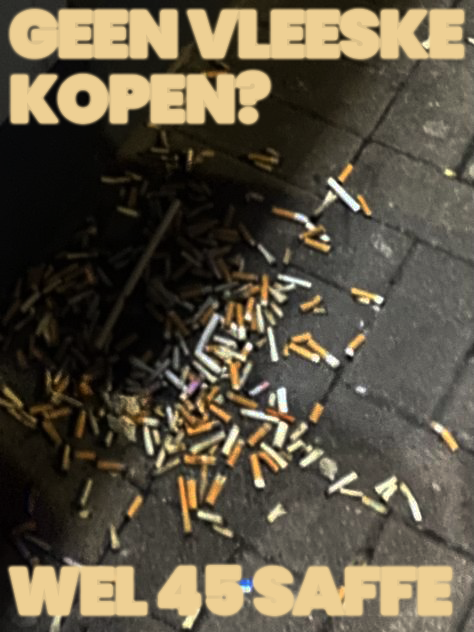
<style>
.page{position:relative;width:474px;height:632px}
.page>*{position:absolute;margin:0}
.t1{font:65px/65px "Poppins-Black";letter-spacing:-0.02em;color:#eed094}
.t2{font:65px "Poppins-Black";letter-spacing:-0.02em;color:#eed094}
</style>
<div class="page">
<p class="t1" style="left:11px;top:10px;width:452px;height:113px">GEEN VLEESKE KOPEN?</p>
<p class="t2" style="left:10px;top:566px;width:441px;height:49px">WEL 45 SAFFE</p>
</div>
